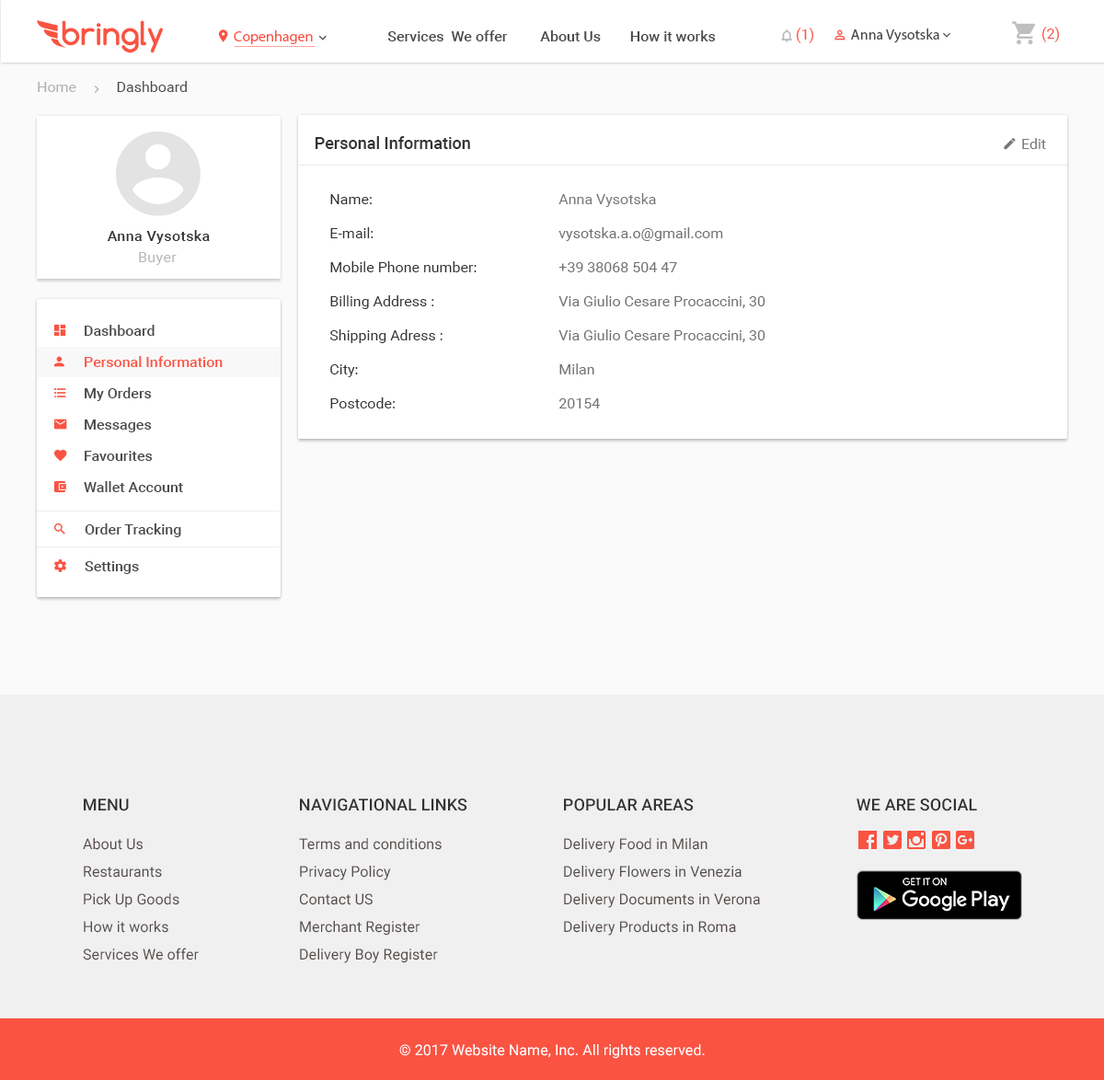
<style>
.page{position:relative;width:1104px;height:1080px;background:#ffffff}
.page>*{position:absolute;margin:0}
.t1{font:14.7px "Roboto-Regular";color:#fa5342}
.t2{font:14.7px "MyriadPro-Regular";color:#4a4a4a}
.t3{font:14.7px "MyriadPro-Regular";color:#fa5342}
.t4{font:14.7px "Roboto-Medium";color:#4a4a4a}
.t5{font:14.7px "Roboto-Regular";color:#4a4a4a}
.t6{font:14.7px "Roboto-Regular";color:#b0b0b0}
.t7{font:16.6px "Roboto-Medium";color:#333333}
.t8{font:14.7px "Roboto-Regular";color:#777777}
.t9{font:14.7px "Roboto-Regular";color:#333333}
.t10{font:14.7px "Roboto-Medium";letter-spacing:0.025em;color:#333333}
.t11{font:14.7px "Roboto-Regular";color:#717171}
.t12{font:14.7px "Roboto-Regular";letter-spacing:0.025em;color:#b8b8b8}
.t13{font:14.7px/31.3px "Roboto-Medium";color:#4a4a4a}
.t14{font:14.7px/31.3px "Roboto-Medium";color:#fa5342}
.t15{font:16.6px "Roboto-Medium";letter-spacing:0.005em;color:#333333}
.t16{font:16.6px "Roboto-Medium";letter-spacing:0.005em;color:#333333;text-transform:uppercase}
.t17{font:14.7px/27.6px "Roboto-Regular";letter-spacing:0.005em;color:#554c4a}
.t18{font:14.7px "Roboto-Regular";letter-spacing:0.005em;color:#ffffff}
</style>
<div class="page">
<p class="t1" style="left:796px;top:28px;width:17px;height:15px">(1)</p>
<p class="t2" style="left:851px;top:29px;width:88px;height:14px">Anna Vysotska</p>
<p class="t1" style="left:1041px;top:27px;width:18px;height:15px">(2)</p>
<p class="t3" style="left:234px;top:30px;width:79px;height:14px">Copenhagen</p>
<p class="t4" style="left:387px;top:30px;width:329px;height:11px">Services  We offer         About Us        How it works</p>
<p class="t5" style="left:38px;top:81px;width:149px;height:11px"><span class="t6">Home           </span>Dashboard</p>
<p class="t7" style="left:315px;top:136px;width:155px;height:13px">Personal Information</p>
<p class="t8" style="left:1022px;top:138px;width:24px;height:11px">Edit</p>
<p class="t9" style="left:330px;top:194px;width:42px;height:10px">Name:</p>
<p class="t8" style="left:558px;top:193px;width:98px;height:14px">Anna Vysotska</p>
<p class="t10" style="left:107px;top:230px;width:103px;height:14px">Anna Vysotska</p>
<p class="t9" style="left:330px;top:227px;width:44px;height:11px">E-mail:</p>
<p class="t11" style="left:558px;top:227px;width:165px;height:14px">vysotska.a.o@gmail.com</p>
<p class="t12" style="left:139px;top:252px;width:38px;height:13px">Buyer</p>
<p class="t9" style="left:330px;top:261px;width:147px;height:11px">Mobile Phone number:</p>
<p class="t11" style="left:558px;top:262px;width:119px;height:10px">+39 38068 504 47</p>
<p class="t9" style="left:330px;top:295px;width:104px;height:14px">Billing Address :</p>
<p class="t11" style="left:558px;top:295px;width:207px;height:13px">Via Giulio Cesare Procaccini, 30</p>
<p class="t13" style="left:84px;top:325px;width:139px;height:167px">Dashboard<br><span class="t14">Personal Information<br></span>My Orders<br>Messages<br>Favourites<br>Wallet Account</p>
<p class="t9" style="left:329px;top:329px;width:114px;height:14px">Shipping Adress :</p>
<p class="t11" style="left:558px;top:329px;width:207px;height:13px">Via Giulio Cesare Procaccini, 30</p>
<p class="t9" style="left:330px;top:364px;width:28px;height:13px">City:</p>
<p class="t11" style="left:559px;top:363px;width:35px;height:11px">Milan</p>
<p class="t9" style="left:330px;top:397px;width:65px;height:11px">Postcode:</p>
<p class="t11" style="left:559px;top:398px;width:41px;height:10px">20154</p>
<p class="t4" style="left:85px;top:523px;width:96px;height:14px">Order Tracking</p>
<p class="t4" style="left:85px;top:561px;width:54px;height:13px">Settings</p>
<p class="t15" style="left:84px;top:799px;width:45px;height:12px">MENU</p>
<p class="t16" style="left:300px;top:799px;width:167px;height:12px">Navigational Links</p>
<p class="t16" style="left:564px;top:799px;width:130px;height:12px">Popular Areas</p>
<p class="t16" style="left:857px;top:799px;width:120px;height:12px">We are social</p>
<p class="t17" style="left:83px;top:838px;width:116px;height:122px">About Us<br>Restaurants<br>Pick Up Goods <br>How it works <br>Services We offer</p>
<p class="t17" style="left:299px;top:838px;width:143px;height:125px">Terms and conditions<br>Privacy Policy<br>Contact US <br>Merchant Register <br>Delivery Boy Register</p>
<p class="t17" style="left:564px;top:838px;width:196px;height:98px">Delivery Food in Milan<br>Delivery Flowers in Venezia<br>Delivery Documents in Verona<br>Delivery Products in Roma</p>
<p class="t18" style="left:399px;top:1044px;width:306px;height:15px">© 2017 Website Name, Inc. All rights reserved.</p>
</div>
